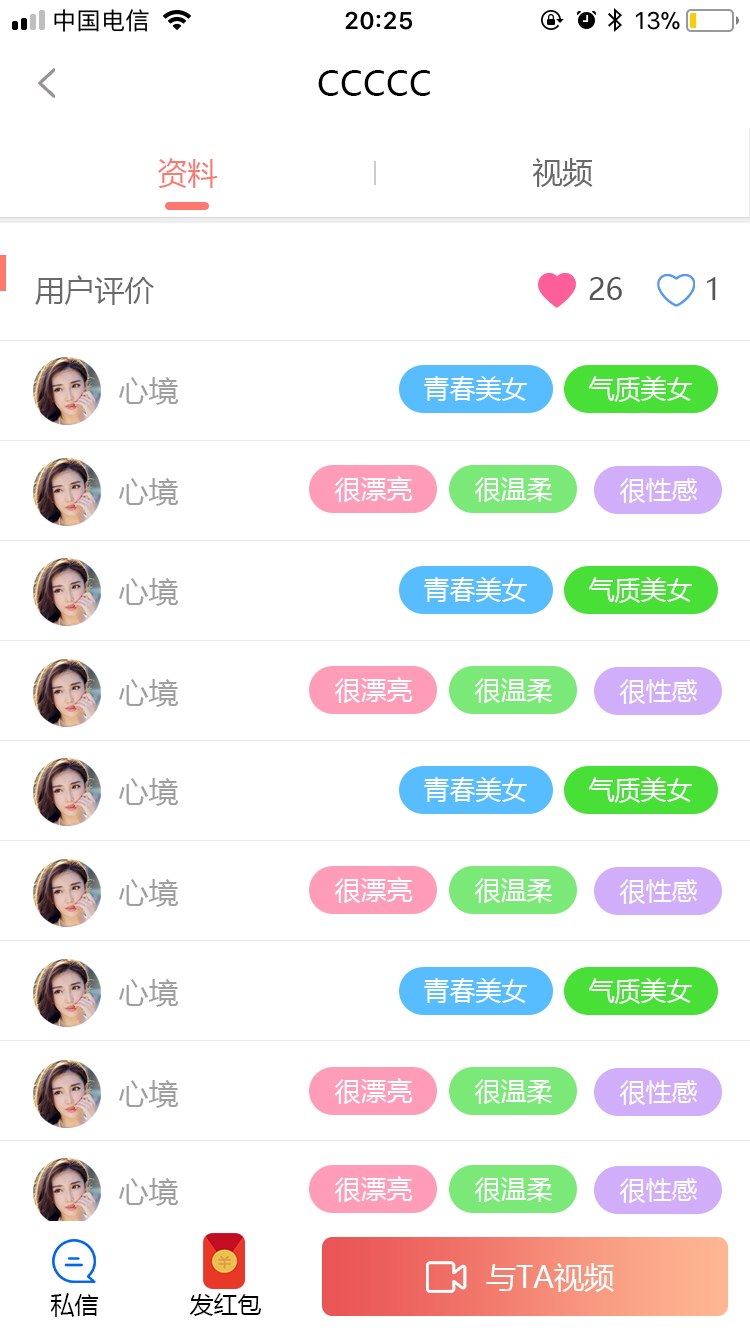
<style>
.page{position:relative;width:750px;height:1334px;background:#ffffff}
.page>*{position:absolute;margin:0}
.t1{font:34px "MicrosoftYaHei";letter-spacing:0.01em;color:#000000}
.t2{font:30px "MicrosoftYaHei";color:#ff776e}
.t3{font:30px "MicrosoftYaHei";color:#696969}
.t4{font:30px "MicrosoftYaHei";color:#6a6a6a}
.t5{font:30px "MicrosoftYaHei";color:#565656}
.t6{font:30px "MicrosoftYaHei";letter-spacing:0.01em;color:#9f9f9f}
.t7{font:26px "MicrosoftYaHei";color:#ffffff}
.t8{font:30px "MicrosoftYaHei";color:#ffffff}
.t9{font:24px "MicrosoftYaHei";color:#000000}
</style>
<div class="page">
<p class="t1" style="left:318px;top:70px;width:112px;height:26px">CCCCC</p>
<p class="t2" style="left:158px;top:158px;width:59px;height:30px">资料</p>
<p class="t3" style="left:533px;top:158px;width:60px;height:29px">视频</p>
<p class="t4" style="left:35px;top:275px;width:119px;height:30px">用户评价</p>
<p class="t5" style="left:589px;top:277px;width:33px;height:23px">26</p>
<p class="t5" style="left:707px;top:277px;width:9px;height:23px">1</p>
<p class="t6" style="left:119px;top:377px;width:60px;height:28px">心境</p>
<p class="t7" style="left:424px;top:376px;width:103px;height:25px">青春美女</p>
<p class="t7" style="left:589px;top:376px;width:103px;height:26px">气质美女</p>
<p class="t6" style="left:119px;top:478px;width:60px;height:28px">心境</p>
<p class="t7" style="left:334px;top:476px;width:79px;height:27px">很漂亮</p>
<p class="t7" style="left:474px;top:477px;width:78px;height:26px">很温柔</p>
<p class="t7" style="left:619px;top:478px;width:78px;height:26px">很性感</p>
<p class="t6" style="left:119px;top:578px;width:60px;height:28px">心境</p>
<p class="t7" style="left:424px;top:577px;width:103px;height:25px">青春美女</p>
<p class="t7" style="left:589px;top:577px;width:103px;height:26px">气质美女</p>
<p class="t7" style="left:334px;top:677px;width:79px;height:27px">很漂亮</p>
<p class="t7" style="left:474px;top:678px;width:78px;height:26px">很温柔</p>
<p class="t6" style="left:119px;top:679px;width:60px;height:28px">心境</p>
<p class="t7" style="left:619px;top:679px;width:78px;height:26px">很性感</p>
<p class="t6" style="left:119px;top:778px;width:60px;height:28px">心境</p>
<p class="t7" style="left:424px;top:777px;width:103px;height:25px">青春美女</p>
<p class="t7" style="left:589px;top:777px;width:103px;height:26px">气质美女</p>
<p class="t6" style="left:119px;top:879px;width:60px;height:28px">心境</p>
<p class="t7" style="left:334px;top:877px;width:79px;height:27px">很漂亮</p>
<p class="t7" style="left:474px;top:878px;width:78px;height:26px">很温柔</p>
<p class="t7" style="left:619px;top:879px;width:78px;height:26px">很性感</p>
<p class="t6" style="left:119px;top:979px;width:60px;height:28px">心境</p>
<p class="t7" style="left:424px;top:978px;width:103px;height:25px">青春美女</p>
<p class="t7" style="left:589px;top:978px;width:103px;height:26px">气质美女</p>
<p class="t6" style="left:119px;top:1080px;width:60px;height:28px">心境</p>
<p class="t7" style="left:334px;top:1078px;width:79px;height:27px">很漂亮</p>
<p class="t7" style="left:474px;top:1079px;width:78px;height:26px">很温柔</p>
<p class="t7" style="left:619px;top:1080px;width:78px;height:26px">很性感</p>
<p class="t6" style="left:119px;top:1178px;width:60px;height:28px">心境</p>
<p class="t7" style="left:334px;top:1176px;width:79px;height:27px">很漂亮</p>
<p class="t7" style="left:474px;top:1177px;width:78px;height:26px">很温柔</p>
<p class="t7" style="left:619px;top:1178px;width:78px;height:26px">很性感</p>
<p class="t8" style="left:486px;top:1263px;width:128px;height:29px">与TA视频</p>
<p class="t9" style="left:50px;top:1293px;width:49px;height:24px">私信</p>
<p class="t9" style="left:189px;top:1293px;width:72px;height:23px">发红包</p>
</div>
